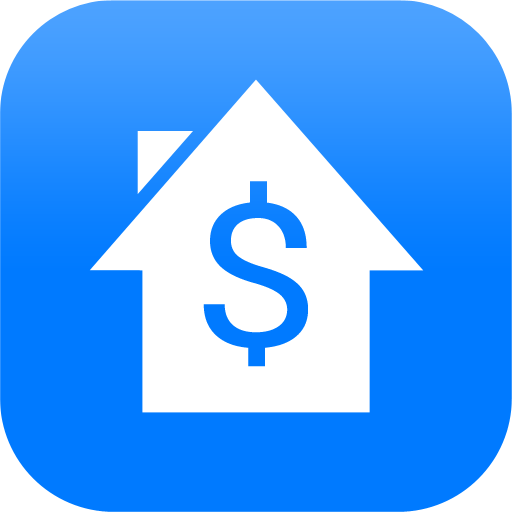
<style>
.page{position:relative;width:512px;height:512px;background:#007aff}
.page>*{position:absolute;margin:0}
.t1{font:199.3px "Roboto-Regular";color:#007aff;scale:1.15 1}
</style>
<div class="page">
<p class="t1" style="left:203px;top:181px;width:105px;height:186px">$</p>
</div>
